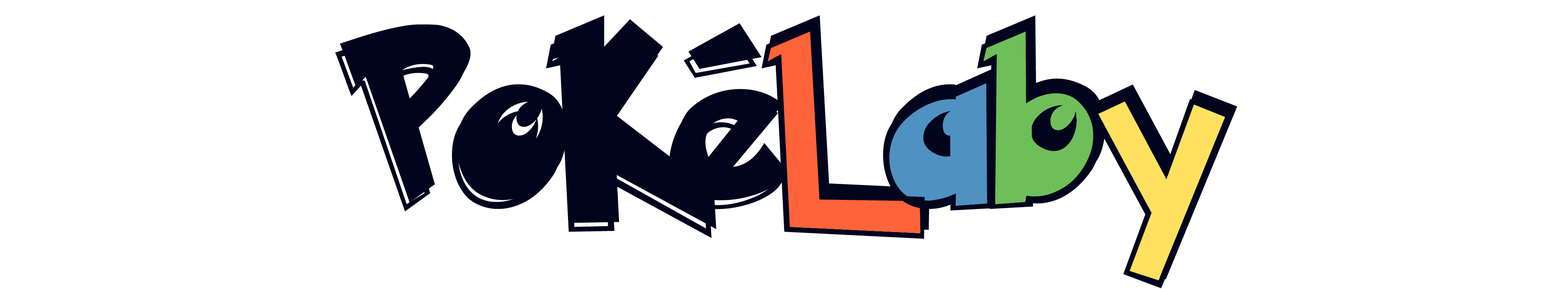
<style>
.page{position:relative;width:1568px;height:289px;background:#ffffff}
.page>*{position:absolute;margin:0}
.t1{font:196px "PokemonSolidNormal";letter-spacing:0.025em;color:#00051d}
.t2{font:196px "PokemonHollowNormal";letter-spacing:0.025em;color:#00051d}
</style>
<div class="page">
<p class="t1" style="left:340px;top:15px;width:897px;height:264px">PoKéLaby</p>
<p class="t2" style="left:335px;top:24px;width:897px;height:264px">PoKéLaby</p>
</div>
